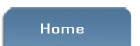
<style>
.page{position:relative;width:140px;height:46px;background:#ffffff}
.page>*{position:absolute;margin:0}
.t1{font:12.7px "AgencyFB-Reg";color:#fcfcfc;scale:2 1}
</style>
<div class="page">
<p class="t1" style="left:41px;top:23px;width:43px;height:11px">Home</p>
</div>
